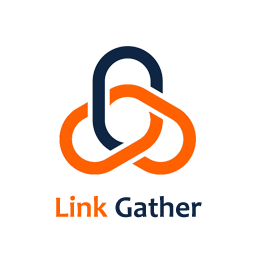
<style>
.page{position:relative;width:256px;height:256px;background:#ffffff}
.page>*{position:absolute;margin:0}
.t1{font:30px "Candara-Bold";color:#0e2544}
.t2{font:30px "Candara-Bold";color:#ff6000}
</style>
<div class="page">
<p class="t1" style="left:56px;top:195px;width:146px;height:23px"><span class="t2">Link </span>Gather</p>
</div>
